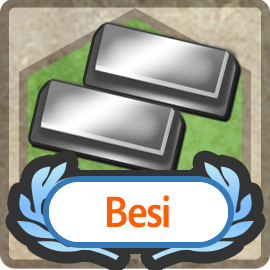
<style>
.page{position:relative;width:270px;height:270px}
.page>*{position:absolute;margin:0}
.t1{font:45px "AdobeClean-Bold";letter-spacing:-0.04em;color:#ff5d00;scale:0.9 1}
</style>
<div class="page">
<p class="t1" style="left:107px;top:195px;width:62px;height:33px">Besi</p>
</div>
